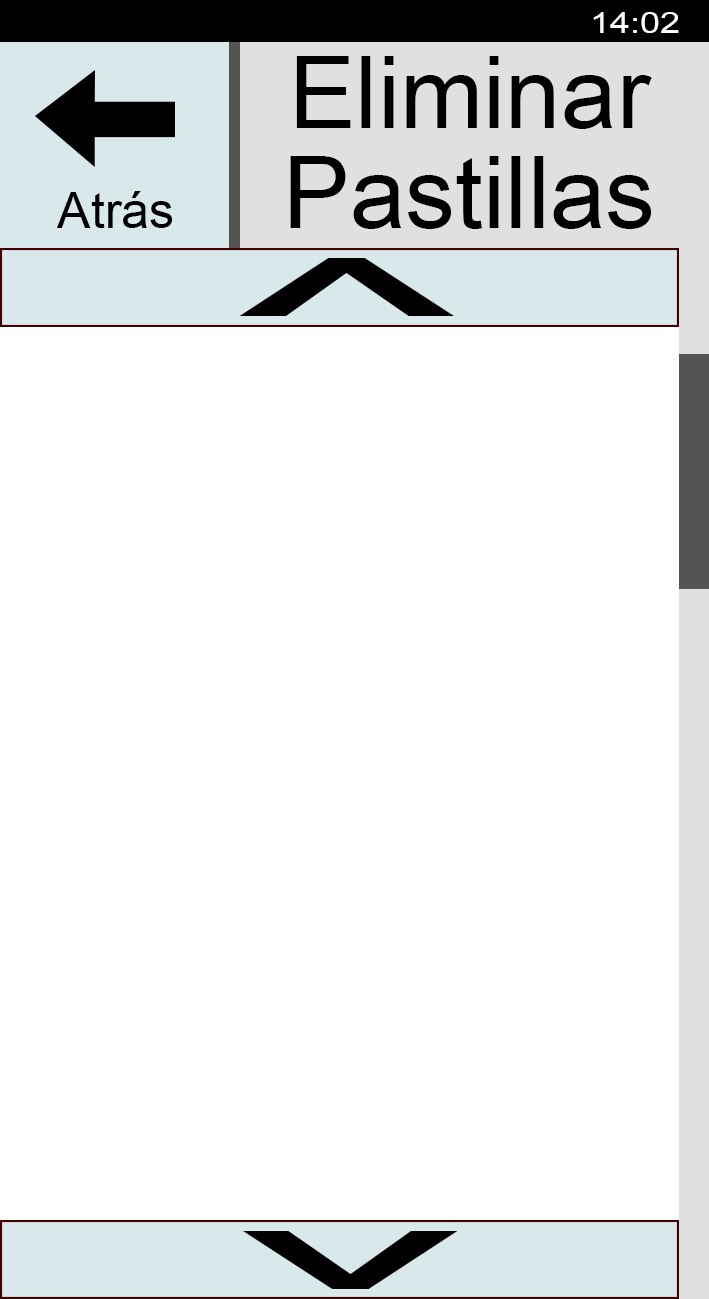
<style>
.page{position:relative;width:709px;height:1299px;background:#ffffff}
.page>*{position:absolute;margin:0}
.t1{font:29.2px "ArialMT";color:#ffffff;scale:1.22 1}
.t2{font:100px/100px "ArialMT";color:#000000}
.t3{font:50px "ArialMT";color:#000000}
.t4{font:150px "ArialMT";color:#000000;scale:3.43 1}
</style>
<div class="page">
<p class="t1" style="left:593px;top:12px;width:86px;height:21px">14:02</p>
<p class="t2" style="left:290px;top:56px;width:362px;height:173px;text-align:center">Eliminar<br>Pastillas</p>
<p class="t3" style="left:57px;top:191px;width:116px;height:37px">Atrás</p>
<p class="t4" style="left:239px;top:258px;width:216px;height:58px">^</p>
<p class="t4" style="left:242px;top:1231px;width:216px;height:58px;rotate:180deg">^</p>
</div>
